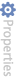
<style>
.page{position:relative;width:16px;height:80px;background:#ffffff}
.page>*{position:absolute;margin:0}
.t1{font:14px "MyriadPro-Regular";color:#c8c8c8;font-weight:bold;scale:0.9 1}
</style>
<div class="page">
<p class="t1" style="left:0px;top:20px;width:14px;height:57px;rotate:90deg">Properties</p>
</div>
